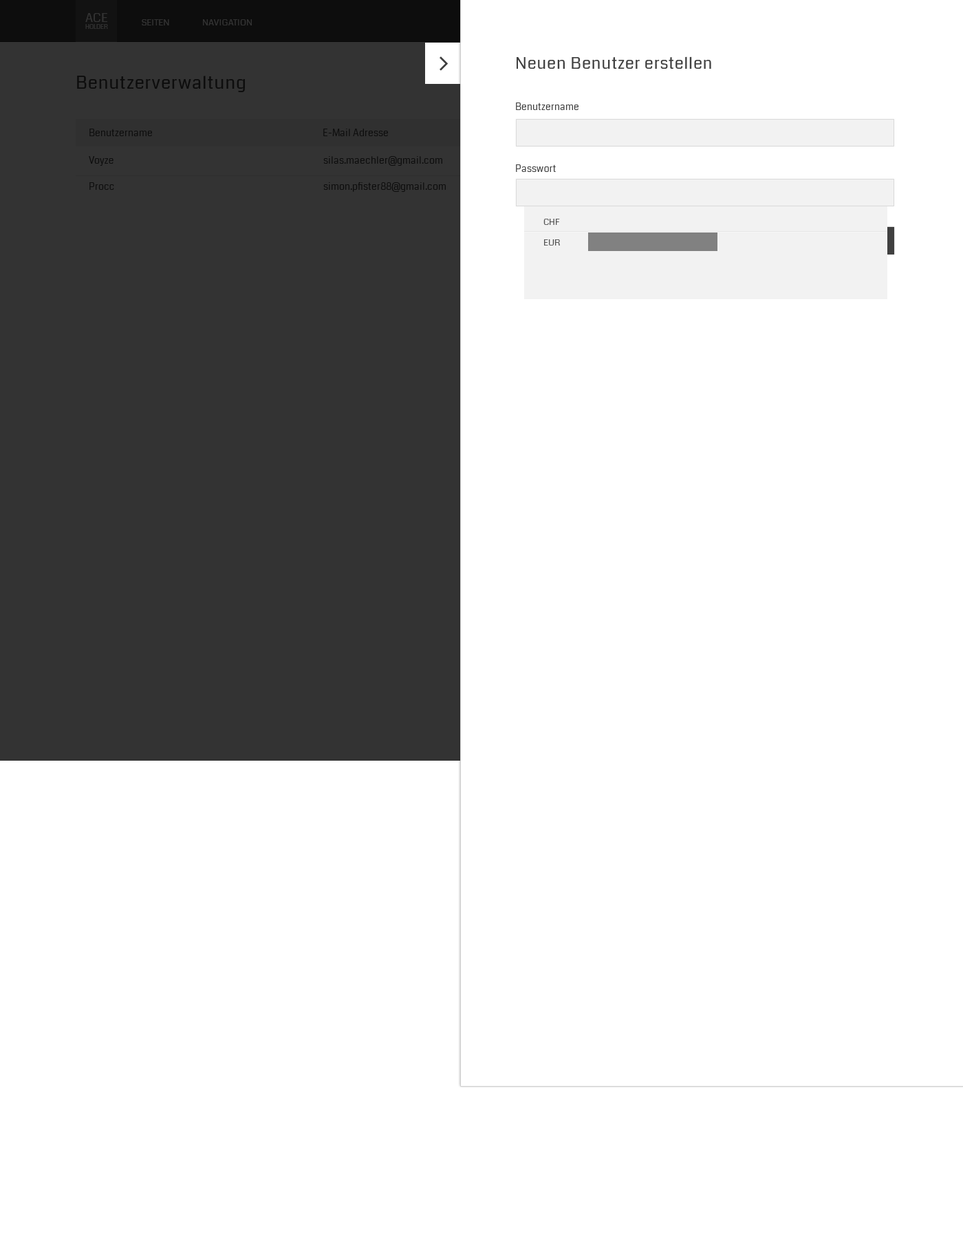
<style>
.page{position:relative;width:963px;height:1238px;background:#ffffff}
.page>*{position:absolute;margin:0}
.t1{font:6.2px "Coda-Regular";color:#333333}
.t2{font:12.4px "Coda-Regular";color:#333333}
.t3{font:8.9px "Coda-Regular";color:#333333;text-transform:uppercase}
.t4{font:16.5px "Coda-Regular";letter-spacing:0.03em;color:#404040}
.t5{font:17.9px "Coda-Regular";letter-spacing:0.03em;color:#0d0d0d}
.t6{font:9.6px "Coda-Regular";color:#404040}
.t7{font:9.6px "Coda-Regular";color:#0d0d0d}
.t8{font:8.9px/13.8px "Coda-Regular";color:#545454}
</style>
<div class="page">
<p class="t1" style="left:85px;top:13px;width:23px;height:16px;text-align:center"><span class="t2">ACE<br></span>HOLDER</p>
<p class="t3" style="left:142px;top:19px;width:27px;height:6px">Seiten</p>
<p class="t3" style="left:203px;top:19px;width:49px;height:6px">Navigation</p>
<p class="t4" style="left:517px;top:56px;width:194px;height:13px">Neuen Benutzer erstellen</p>
<p class="t5" style="left:77px;top:76px;width:168px;height:16px">Benutzerverwaltung</p>
<p class="t6" style="left:516px;top:102px;width:63px;height:8px">Benutzername</p>
<p class="t7" style="left:89px;top:129px;width:63px;height:7px">Benutzername</p>
<p class="t7" style="left:323px;top:129px;width:65px;height:7px">E-Mail Adresse</p>
<p class="t7" style="left:89px;top:156px;width:25px;height:10px">Voyze</p>
<p class="t7" style="left:323px;top:156px;width:119px;height:10px">silas.maechler@gmail.com</p>
<p class="t6" style="left:516px;top:164px;width:40px;height:8px">Passwort</p>
<p class="t7" style="left:89px;top:182px;width:25px;height:8px">Procc</p>
<p class="t7" style="left:323px;top:182px;width:123px;height:10px">simon.pfister88@gmail.com</p>
<p class="t8" style="left:543px;top:219px;width:17px;height:27px">CHF<br>EUR</p>
</div>
